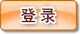
<style>
.page{position:relative;width:80px;height:34px}
.page>*{position:absolute;margin:0}
.t1{font:16px "SimHei";letter-spacing:0.2em;color:#621010}
</style>
<div class="page">
<p class="t1" style="left:21px;top:8px;width:34px;height:15px">登录</p>
</div>
